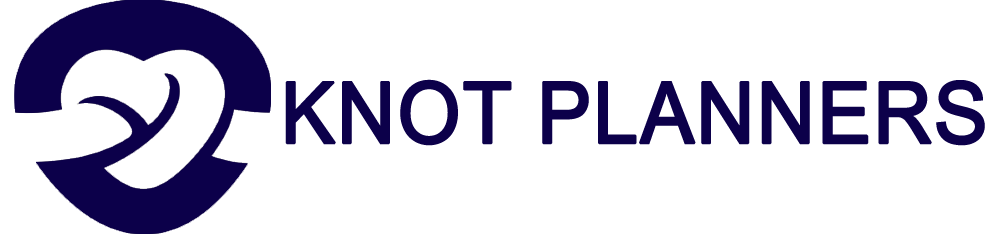
<style>
.page{position:relative;width:1000px;height:234px;background:#ffffff}
.page>*{position:absolute;margin:0}
.t1{font:85px "ArialMT";color:#0c004a;font-weight:bold;scale:0.95 1}
</style>
<div class="page">
<p class="t1" style="left:285px;top:79px;width:700px;height:67px">KNOT PLANNERS</p>
</div>
